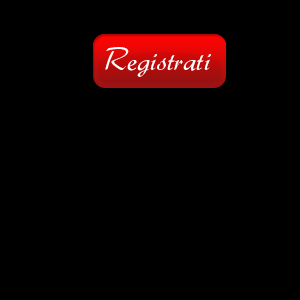
<style>
.page{position:relative;width:300px;height:300px;background:#000000}
.page>*{position:absolute;margin:0}
.t1{font:33.6px "Gabrielle";letter-spacing:0.005em;color:#ffffff}
</style>
<div class="page">
<p class="t1" style="left:105px;top:47px;width:106px;height:30px">Registrati</p>
</div>
